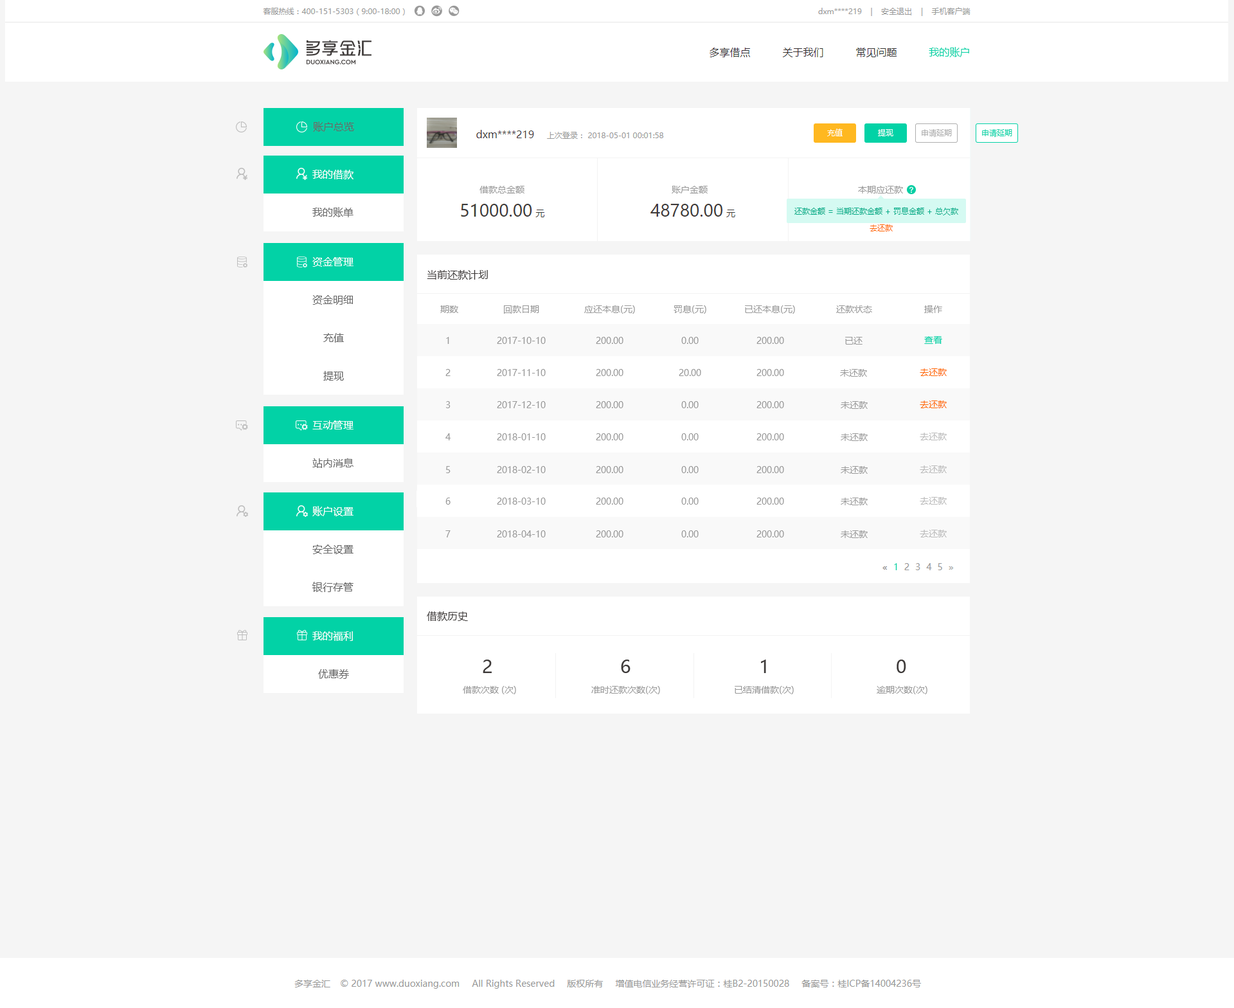
<style>
.page{position:relative;width:1234px;height:1008px;background:#f5f5f5}
.page>*{position:absolute;margin:0}
.t1{font:10.3px "MicrosoftYaHei";color:#02d2a6}
.t2{font:10.3px "MicrosoftYaHei";color:#666666}
.t3{font:7.7px "MicrosoftYaHei";color:#ffffff}
.t4{font:7.7px "MicrosoftYaHei";color:#aeaeae}
.t5{font:7.7px "MicrosoftYaHei";color:#02d2a6}
.t6{font:10.3px "MicrosoftYaHei";color:#ffffff}
.t7{font:9px "MicrosoftYaHei";color:#999999}
.t8{font:7.7px "MicrosoftYaHei";color:#00ab87}
.t9{font:7.7px "MicrosoftYaHei";color:#ff6800}
.t10{font:10.3px "MicrosoftYaHei";color:#3e3a39}
.t11{font:9px "MicrosoftYaHei";color:#02d2a6}
.t12{font:9px "MicrosoftYaHei";color:#ff6800}
.t13{font:9px "MicrosoftYaHei";color:#bbbbbb}
.t14{font:18px "MicrosoftYaHei";color:#3e3a39}
</style>
<div class="page">
<p class="t1" style="left:929px;top:47px;width:40px;height:10px">我的账户</p>
<p class="t2" style="left:313px;top:122px;width:41px;height:10px">账户总览</p>
<p class="t3" style="left:827px;top:129px;width:16px;height:7px">充值</p>
<p class="t3" style="left:878px;top:129px;width:16px;height:7px">提现</p>
<p class="t4" style="left:922px;top:129px;width:30px;height:8px">申请延期</p>
<p class="t5" style="left:982px;top:129px;width:31px;height:8px">申请延期</p>
<p class="t6" style="left:312px;top:170px;width:42px;height:9px">我的借款</p>
<p class="t7" style="left:480px;top:186px;width:45px;height:8px">借款总金额</p>
<p class="t7" style="left:672px;top:186px;width:36px;height:8px">账户金额</p>
<p class="t7" style="left:858px;top:186px;width:45px;height:8px">本期应还款</p>
<p class="t2" style="left:312px;top:207px;width:42px;height:10px">我的账单</p>
<p class="t8" style="left:795px;top:207px;width:164px;height:8px">还款金额 = 当期还款金额 + 罚息金额 + 总欠款</p>
<p class="t9" style="left:870px;top:224px;width:23px;height:7px">去还款</p>
<p class="t6" style="left:312px;top:257px;width:42px;height:10px">资金管理</p>
<p class="t10" style="left:427px;top:270px;width:61px;height:10px">当前还款计划</p>
<p class="t2" style="left:312px;top:295px;width:41px;height:10px">资金明细</p>
<p class="t7" style="left:440px;top:305px;width:18px;height:8px">期数</p>
<p class="t7" style="left:504px;top:305px;width:35px;height:9px">回款日期</p>
<p class="t7" style="left:584px;top:305px;width:51px;height:9px">应还本息(元)</p>
<p class="t7" style="left:674px;top:305px;width:32px;height:9px">罚息(元)</p>
<p class="t7" style="left:745px;top:305px;width:50px;height:9px">已还本息(元)</p>
<p class="t7" style="left:836px;top:305px;width:36px;height:8px">还款状态</p>
<p class="t7" style="left:924px;top:305px;width:18px;height:8px">操作</p>
<p class="t2" style="left:323px;top:333px;width:21px;height:10px">充值</p>
<p class="t7" style="left:446px;top:337px;width:3px;height:7px">1</p>
<p class="t7" style="left:497px;top:337px;width:49px;height:7px">2017-10-10</p>
<p class="t7" style="left:596px;top:337px;width:28px;height:7px">200.00</p>
<p class="t7" style="left:681px;top:337px;width:18px;height:7px">0.00</p>
<p class="t7" style="left:757px;top:337px;width:27px;height:7px">200.00</p>
<p class="t7" style="left:845px;top:337px;width:18px;height:8px">已还</p>
<p class="t11" style="left:924px;top:336px;width:18px;height:8px">查看</p>
<p class="t2" style="left:323px;top:371px;width:21px;height:10px">提现</p>
<p class="t7" style="left:446px;top:369px;width:5px;height:7px">2</p>
<p class="t7" style="left:497px;top:369px;width:49px;height:7px">2017-11-10</p>
<p class="t7" style="left:596px;top:369px;width:28px;height:7px">200.00</p>
<p class="t7" style="left:679px;top:369px;width:22px;height:7px">20.00</p>
<p class="t7" style="left:757px;top:369px;width:27px;height:7px">200.00</p>
<p class="t7" style="left:840px;top:369px;width:27px;height:8px">未还款</p>
<p class="t12" style="left:920px;top:368px;width:27px;height:8px">去还款</p>
<p class="t7" style="left:446px;top:401px;width:5px;height:7px">3</p>
<p class="t7" style="left:497px;top:401px;width:49px;height:7px">2017-12-10</p>
<p class="t7" style="left:596px;top:401px;width:28px;height:7px">200.00</p>
<p class="t7" style="left:681px;top:401px;width:18px;height:7px">0.00</p>
<p class="t7" style="left:757px;top:401px;width:27px;height:7px">200.00</p>
<p class="t7" style="left:841px;top:401px;width:27px;height:8px">未还款</p>
<p class="t12" style="left:920px;top:401px;width:27px;height:7px">去还款</p>
<p class="t6" style="left:312px;top:420px;width:42px;height:9px">互动管理</p>
<p class="t7" style="left:446px;top:433px;width:5px;height:7px">4</p>
<p class="t7" style="left:497px;top:433px;width:49px;height:7px">2018-01-10</p>
<p class="t7" style="left:596px;top:433px;width:28px;height:7px">200.00</p>
<p class="t7" style="left:681px;top:433px;width:18px;height:7px">0.00</p>
<p class="t7" style="left:757px;top:433px;width:27px;height:7px">200.00</p>
<p class="t7" style="left:841px;top:433px;width:27px;height:8px">未还款</p>
<p class="t13" style="left:920px;top:433px;width:27px;height:7px">去还款</p>
<p class="t2" style="left:312px;top:458px;width:42px;height:10px">站内消息</p>
<p class="t7" style="left:446px;top:466px;width:5px;height:7px">5</p>
<p class="t7" style="left:497px;top:466px;width:49px;height:7px">2018-02-10</p>
<p class="t7" style="left:596px;top:466px;width:28px;height:7px">200.00</p>
<p class="t7" style="left:681px;top:466px;width:18px;height:7px">0.00</p>
<p class="t7" style="left:757px;top:466px;width:27px;height:7px">200.00</p>
<p class="t7" style="left:841px;top:466px;width:27px;height:8px">未还款</p>
<p class="t13" style="left:920px;top:465px;width:27px;height:8px">去还款</p>
<p class="t7" style="left:446px;top:498px;width:5px;height:7px">6</p>
<p class="t7" style="left:497px;top:498px;width:49px;height:7px">2018-03-10</p>
<p class="t7" style="left:596px;top:498px;width:28px;height:7px">200.00</p>
<p class="t7" style="left:681px;top:498px;width:18px;height:7px">0.00</p>
<p class="t7" style="left:757px;top:498px;width:27px;height:7px">200.00</p>
<p class="t7" style="left:841px;top:498px;width:27px;height:7px">未还款</p>
<p class="t13" style="left:920px;top:497px;width:27px;height:8px">去还款</p>
<p class="t6" style="left:312px;top:506px;width:42px;height:10px">账户设置</p>
<p class="t7" style="left:446px;top:530px;width:5px;height:7px">7</p>
<p class="t7" style="left:497px;top:530px;width:49px;height:7px">2018-04-10</p>
<p class="t7" style="left:596px;top:530px;width:28px;height:7px">200.00</p>
<p class="t7" style="left:681px;top:530px;width:18px;height:7px">0.00</p>
<p class="t7" style="left:757px;top:530px;width:27px;height:7px">200.00</p>
<p class="t7" style="left:841px;top:530px;width:27px;height:8px">未还款</p>
<p class="t13" style="left:920px;top:530px;width:27px;height:7px">去还款</p>
<p class="t2" style="left:312px;top:544px;width:42px;height:10px">安全设置</p>
<p class="t2" style="left:312px;top:582px;width:42px;height:10px">银行存管</p>
<p class="t10" style="left:427px;top:611px;width:41px;height:10px">借款历史</p>
<p class="t6" style="left:312px;top:631px;width:41px;height:10px">我的福利</p>
<p class="t14" style="left:483px;top:660px;width:9px;height:13px">2</p>
<p class="t14" style="left:621px;top:660px;width:10px;height:13px">6</p>
<p class="t14" style="left:761px;top:660px;width:5px;height:13px">1</p>
<p class="t14" style="left:897px;top:660px;width:9px;height:13px">0</p>
<p class="t2" style="left:318px;top:669px;width:31px;height:10px">优惠券</p>
<p class="t7" style="left:463px;top:686px;width:53px;height:8px">借款次数 (次)</p>
<p class="t7" style="left:591px;top:686px;width:69px;height:8px">准时还款次数(次)</p>
<p class="t7" style="left:735px;top:686px;width:59px;height:8px">已结清借款(次)</p>
<p class="t7" style="left:877px;top:686px;width:51px;height:8px">逾期次数(次)</p>
</div>
